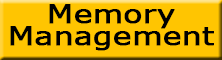
<style>
.page{position:relative;width:222px;height:60px;background:#ffc501}
.page>*{position:absolute;margin:0}
.t1{font:24.5px/22px "Verdana";color:#000000;font-weight:bold;scale:1.25 1}
</style>
<div class="page">
<p class="t1" style="left:10px;top:4px;width:204px;height:47px;text-align:center">Memory Management</p>
</div>
